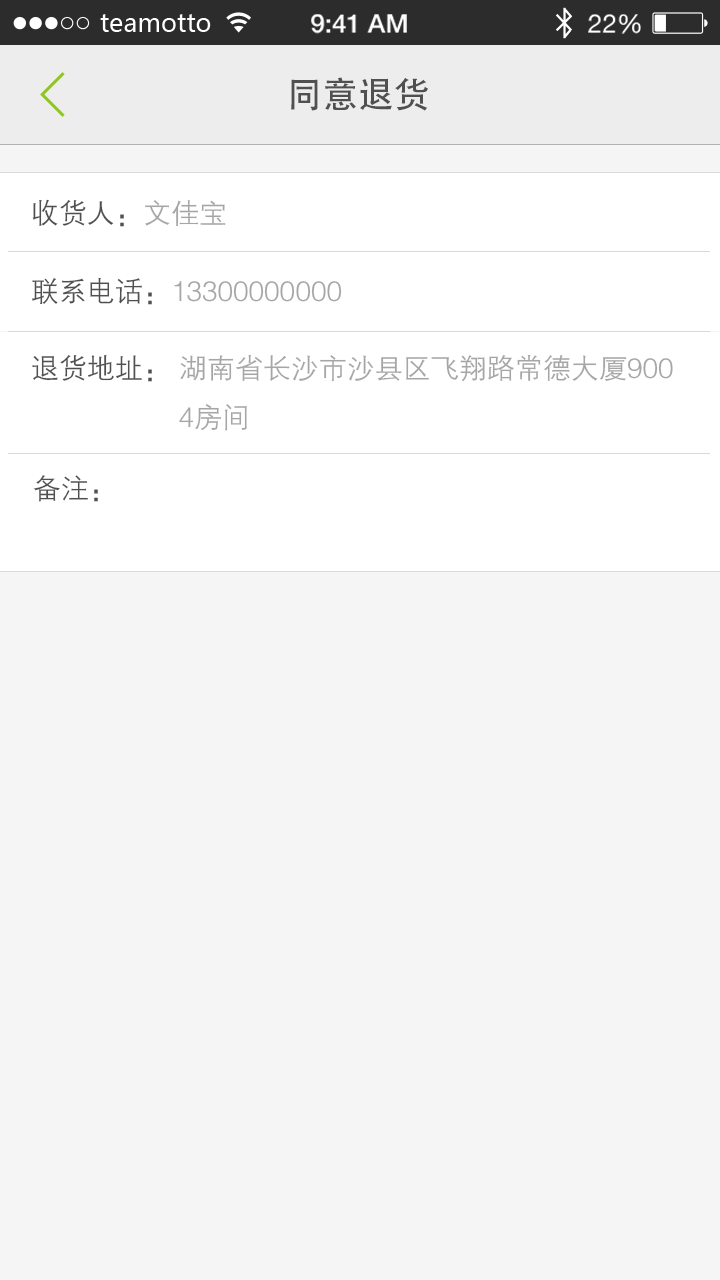
<style>
.page{position:relative;width:720px;height:1280px;background:#f5f5f5}
.page>*{position:absolute;margin:0}
.t1{font:36px "AdobeHeitiStd-Regular";color:#505050}
.t2{font:28px "FZZDXJW--GB1-0";color:#505050}
.t3{font:28px "FZZDXJW--GB1-0";color:#a6a6a6}
</style>
<div class="page">
<p class="t1" style="left:291px;top:77px;width:137px;height:34px">同意退货</p>
<p class="t2" style="left:32px;top:199px;width:194px;height:28px">收货人：<span class="t3">文佳宝</span></p>
<p class="t3" style="left:32px;top:277px;width:310px;height:28px"><span class="t2">联系电话：</span>13300000000</p>
<p class="t3" style="left:32px;top:354px;width:641px;height:77px"><span class="t2">退货地址： </span>湖南省长沙市沙县区飞翔路常德大厦900<br>                   4房间</p>
<p class="t2" style="left:33px;top:475px;width:65px;height:27px">备注：</p>
</div>
